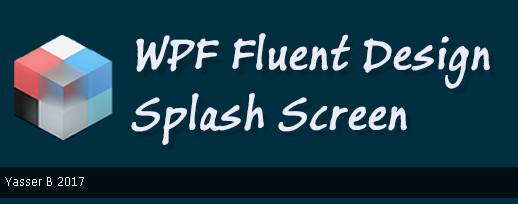
<style>
.page{position:relative;width:518px;height:204px;background:#003040}
.page>*{position:absolute;margin:0}
.t1{font:50px/60px "BuxtonSketch";color:#ebebfa;font-weight:bold;font-style:italic}
</style>
<div class="page">
<p class="t1" style="left:131px;top:33px;width:359px;height:112px">WPF Fluent Design <br>Splash Screen</p>
</div>
